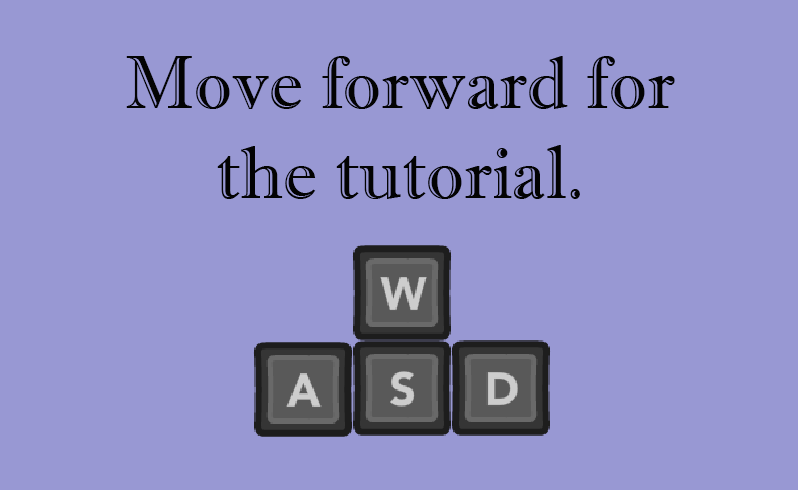
<style>
.page{position:relative;width:798px;height:490px;background:#9898d3}
.page>*{position:absolute;margin:0}
.t1{font:74.8px "ImprintMT-Shadow";color:#030303}
</style>
<div class="page">
<p class="t1" style="left:126px;top:56px;width:549px;height:143px;text-align:center">Move forward for<br>the tutorial.</p>
</div>
